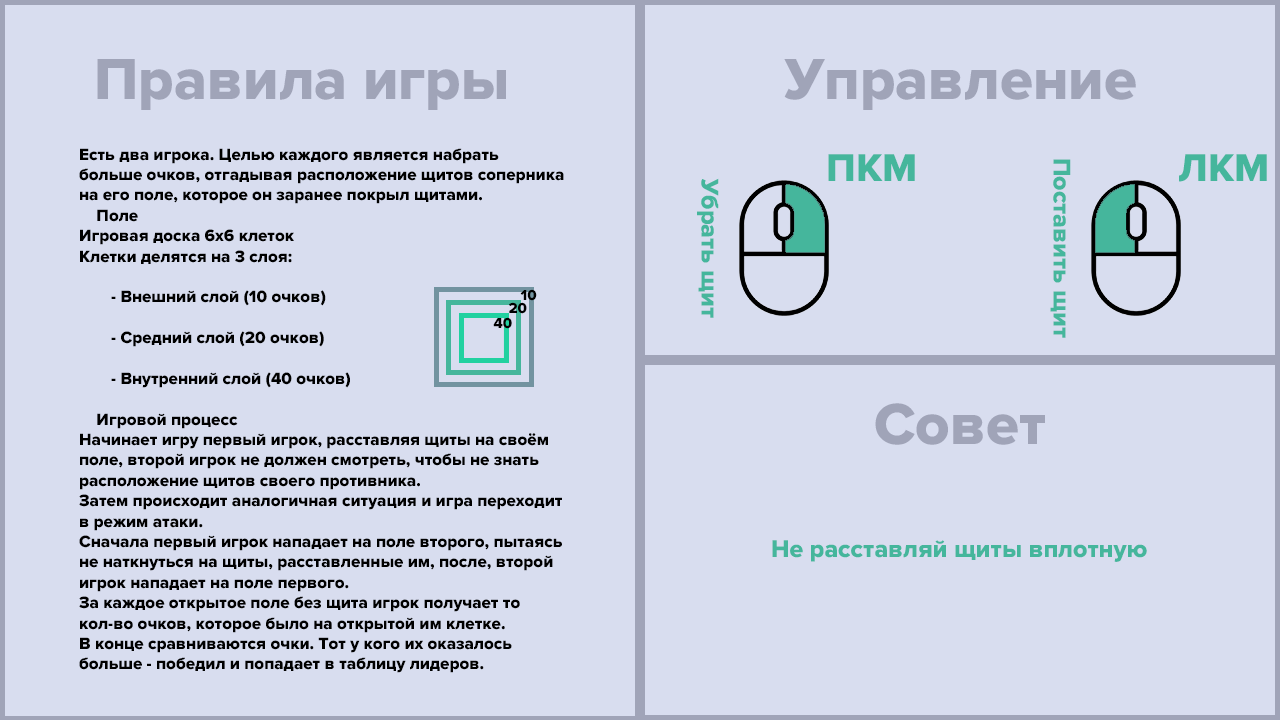
<style>
.page{position:relative;width:1280px;height:720px;background:#d8ddef}
.page>*{position:absolute;margin:0}
.t1{font:60px "ProximaNova-Extrabld";color:#a0a4b8}
.t2{font:17px "ProximaNova-Extrabld";color:#000000}
.t3{font:40px "ProximaNova-Extrabld";color:#45b69c}
.t4{font:25px "ProximaNova-Extrabld";color:#45b69c}
.t5{font:15px "ProximaNova-Extrabld";color:#000000}
</style>
<div class="page">
<p class="t1" style="left:97px;top:59px;width:409px;height:51px">Правила игры</p>
<p class="t1" style="left:784px;top:59px;width:352px;height:51px">Управление</p>
<p class="t2" style="left:79px;top:148px;width:485px;height:525px">Есть два игрока. Целью каждого является набрать <br>больше очков, отгадывая расположение щитов соперника <br>на его поле, которое он заранее покрыл щитами. <br>    Поле<br>Игровая доска 6х6 клеток <br>Клетки делятся на 3 слоя:<br><br> - Внешний слой (10 очков)<br><br> - Средний слой (20 очков)<br><br> - Внутренний слой (40 очков)<br><br>    Игровой процесс<br>Начинает игру первый игрок, расставляя щиты на своём <br>поле, второй игрок не должен смотреть, чтобы не знать <br>расположение щитов своего противника.<br>Затем происходит аналогичная ситуация и игра переходит<br>в режим атаки.<br>Сначала первый игрок нападает на поле второго, пытаясь<br>не наткнуться на щиты, расставленные им, после, второй<br>игрок нападает на поле первого.<br>За каждое открытое поле без щита игрок получает то <br>кол-во очков, которое было на открытой им клетке.<br>В конце сравниваются очки. Тот у кого их оказалось <br>больше - победил и попадает в таблицу лидеров.</p>
<p class="t3" style="left:828px;top:154px;width:87px;height:27px">ПКМ</p>
<p class="t4" style="left:1050px;top:159px;width:21px;height:179px;rotate:90deg">Поставить щит</p>
<p class="t3" style="left:1179px;top:154px;width:88px;height:28px">ЛКМ</p>
<p class="t4" style="left:697px;top:178px;width:22px;height:140px;rotate:90deg">Убрать щит</p>
<p class="t5" style="left:520px;top:289px;width:17px;height:12px">10</p>
<p class="t5" style="left:509px;top:302px;width:18px;height:12px">20</p>
<p class="t5" style="left:493px;top:317px;width:19px;height:12px">40</p>
<p class="t1" style="left:875px;top:403px;width:170px;height:42px">Совет</p>
<p class="t4" style="left:772px;top:540px;width:375px;height:22px">Не расставляй щиты вплотную</p>
</div>
